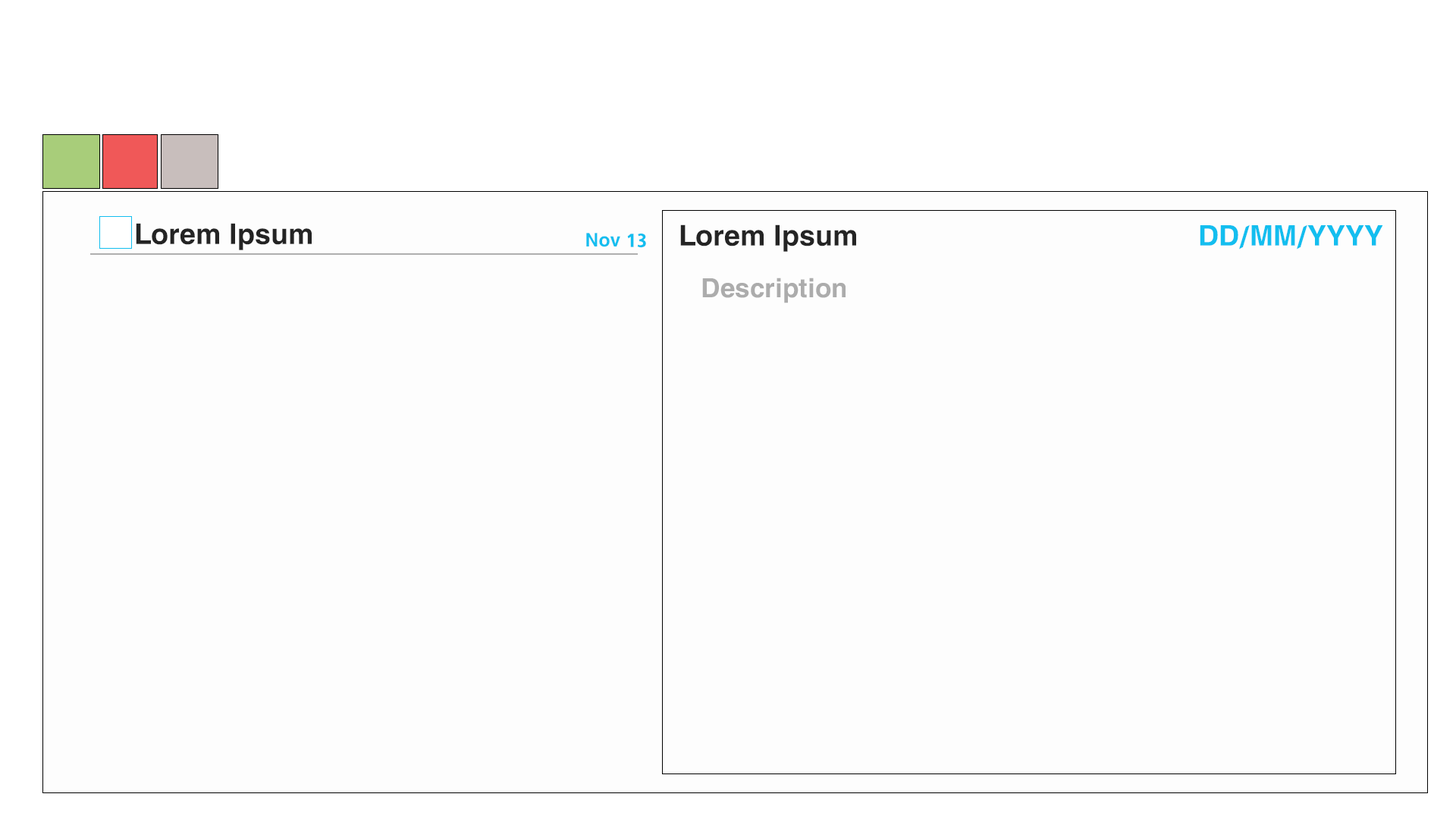
<style>
.page{position:relative;width:1456px;height:819px;background:#fdfdfd}
.page>*{position:absolute;margin:0}
.t1{font:32.8px "HacenMaghreb";color:#242424}
.t2{font:21.5px "HacenMaghreb";color:#13beef}
.t3{font:32.7px "HacenMaghreb";color:#13beef}
.t4{font:30.6px "HacenMaghreb";color:#acacac}
</style>
<div class="page">
<p class="t1" style="left:136px;top:223px;width:176px;height:27px">Lorem Ipsum</p>
<p class="t2" style="left:586px;top:233px;width:60px;height:15px">Nov 13</p>
<p class="t1" style="left:680px;top:224px;width:176px;height:28px">Lorem Ipsum</p>
<p class="t3" style="left:1200px;top:224px;width:183px;height:25px">DD/MM/YYYY</p>
<p class="t4" style="left:702px;top:278px;width:144px;height:25px">Description</p>
</div>
